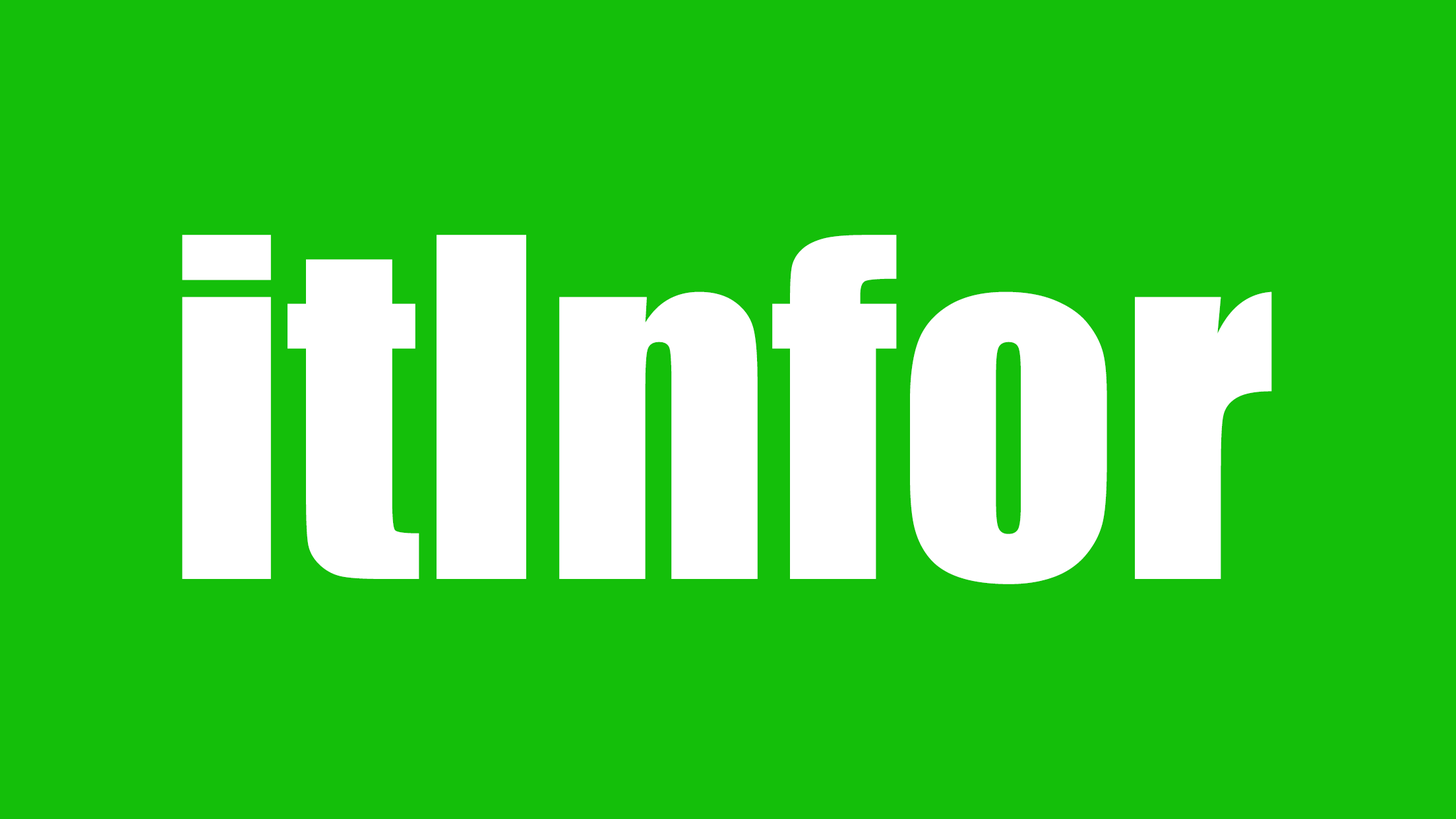
<style>
.page{position:relative;width:1456px;height:819px;background:#14bf0a}
.page>*{position:absolute;margin:0}
.t1{font:434.9px "Impact";color:#ffffff}
</style>
<div class="page">
<p class="t1" style="left:182px;top:235px;width:1090px;height:349px">itInfor</p>
</div>
